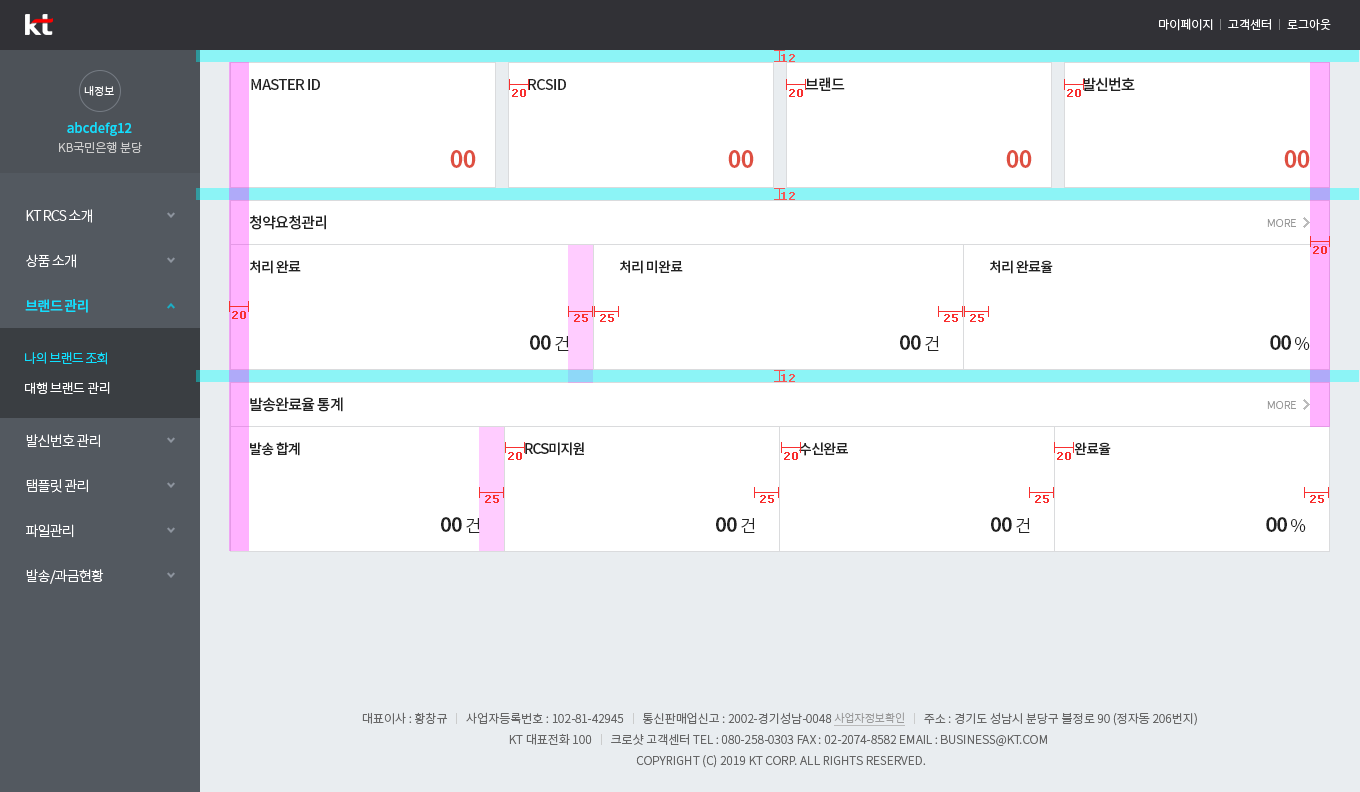
<style>
.page{position:relative;width:1360px;height:792px;background:#ffffff}
.page>*{position:absolute;margin:0}
.t1{font:12px "NotoSansCJKkr-Light";color:#ffffff;text-transform:uppercase}
.t2{font:15px "NotoSansCJKkr-Medium";letter-spacing:-0.05em;color:#222222}
.t3{font:11px "NotoSansCJKkr-Light";color:#ffffff}
.t4{font:13px "NotoSansCJKkr-Medium";letter-spacing:0.01em;color:#0fe0ff}
.t5{font:12px "NotoSansCJKkr-Light";color:#cccccc}
.t6{font:24px "NotoSansCJKkr-Bold";letter-spacing:-0.05em;color:#de4f41}
.t7{font:14px "NotoSansCJKkr-Light";letter-spacing:-0.05em;color:#ffffff}
.t8{font:11px "NotoSansCJKkr-Light";color:#999999}
.t9{font:14px "NotoSansCJKkr-Medium";letter-spacing:-0.05em;color:#222222}
.t10{font:14px "NotoSansCJKkr-Medium";letter-spacing:-0.05em;color:#0fe0ff}
.t11{font:20px "NotoSansCJKkr-Bold";letter-spacing:-0.05em;color:#222222}
.t12{font:17px "NotoSansCJKkr-Light";letter-spacing:-0.05em;color:#222222}
.t13{font:13px "NotoSansCJKkr-Light";letter-spacing:-0.05em;color:#0fe0ff}
.t14{font:13px "NotoSansCJKkr-Light";letter-spacing:-0.03em;color:#ffffff}
</style>
<div class="page">
<p class="t1" style="left:1159px;top:18px;width:54px;height:13px">마이페이지</p>
<p class="t1" style="left:1228px;top:19px;width:43px;height:11px">고객센터</p>
<p class="t1" style="left:1287px;top:19px;width:44px;height:12px">로그아웃</p>
<p class="t2" style="left:805px;top:77px;width:40px;height:14px">브랜드</p>
<p class="t2" style="left:1083px;top:77px;width:52px;height:14px">발신번호</p>
<p class="t3" style="left:84px;top:85px;width:30px;height:11px">내정보</p>
<p class="t2" style="left:251px;top:79px;width:69px;height:11px">MASTER ID</p>
<p class="t2" style="left:528px;top:79px;width:38px;height:11px">RCSID</p>
<p class="t4" style="left:67px;top:122px;width:65px;height:14px">abcdefg12</p>
<p class="t5" style="left:59px;top:141px;width:83px;height:12px">KB국민은행 분당</p>
<p class="t6" style="left:450px;top:150px;width:26px;height:18px">00</p>
<p class="t6" style="left:728px;top:150px;width:26px;height:18px">00</p>
<p class="t6" style="left:1006px;top:150px;width:26px;height:18px">00</p>
<p class="t6" style="left:1284px;top:150px;width:26px;height:18px">00</p>
<p class="t7" style="left:26px;top:209px;width:66px;height:14px">KT RCS 소개</p>
<p class="t2" style="left:249px;top:215px;width:77px;height:15px">청약요청관리</p>
<p class="t8" style="left:1267px;top:219px;width:29px;height:8px">MORE</p>
<p class="t7" style="left:26px;top:254px;width:50px;height:14px">상품 소개</p>
<p class="t9" style="left:250px;top:260px;width:51px;height:14px">처리 완료</p>
<p class="t9" style="left:620px;top:260px;width:63px;height:14px">처리 미완료</p>
<p class="t9" style="left:990px;top:260px;width:63px;height:14px">처리 완료율</p>
<p class="t10" style="left:25px;top:299px;width:63px;height:14px">브랜드 관리</p>
<p class="t11" style="left:530px;top:335px;width:39px;height:16px">00 <span class="t12">건</span></p>
<p class="t11" style="left:900px;top:335px;width:39px;height:16px">00 <span class="t12">건</span></p>
<p class="t11" style="left:1270px;top:335px;width:40px;height:15px">00 <span class="t12">%</span></p>
<p class="t13" style="left:25px;top:352px;width:82px;height:13px">나의 브랜드 조회</p>
<p class="t14" style="left:25px;top:382px;width:85px;height:12px">대행 브랜드 관리</p>
<p class="t2" style="left:250px;top:397px;width:93px;height:15px">발송완료율 통계</p>
<p class="t8" style="left:1267px;top:401px;width:29px;height:8px">MORE</p>
<p class="t7" style="left:26px;top:434px;width:74px;height:14px">발신번호 관리</p>
<p class="t9" style="left:250px;top:442px;width:50px;height:14px">발송 합계</p>
<p class="t9" style="left:525px;top:442px;width:59px;height:14px">RCS미지원</p>
<p class="t9" style="left:799px;top:442px;width:49px;height:14px">수신완료</p>
<p class="t9" style="left:1074px;top:442px;width:37px;height:13px">완료율</p>
<p class="t7" style="left:26px;top:479px;width:62px;height:14px">탬플릿 관리</p>
<p class="t11" style="left:441px;top:517px;width:39px;height:16px">00 <span class="t12">건</span></p>
<p class="t11" style="left:716px;top:517px;width:39px;height:16px">00 <span class="t12">건</span></p>
<p class="t11" style="left:991px;top:517px;width:39px;height:16px">00 <span class="t12">건</span></p>
<p class="t11" style="left:1266px;top:517px;width:40px;height:15px">00 <span class="t12">%</span></p>
<p class="t7" style="left:26px;top:524px;width:48px;height:14px">파일관리</p>
<p class="t7" style="left:26px;top:569px;width:78px;height:15px">발송/과금현황</p>
</div>
